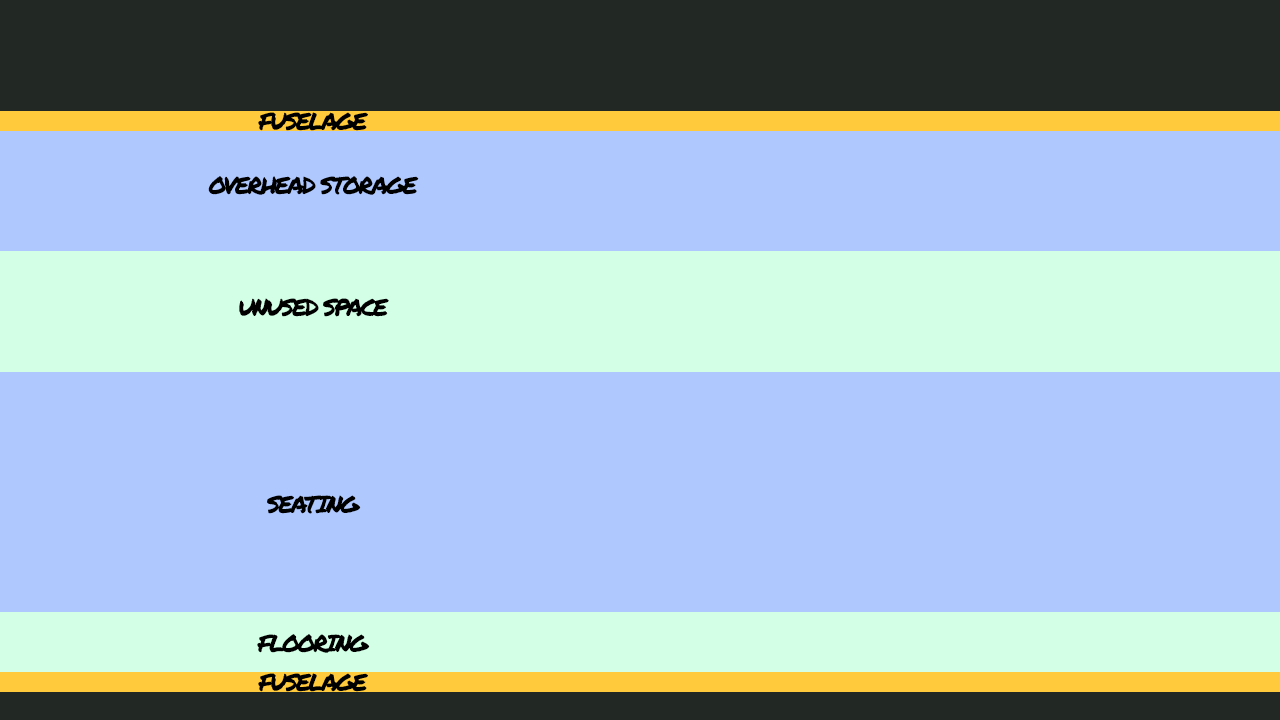
<style>
.page{position:relative;width:1280px;height:720px;background:#afc9ff}
.page>*{position:absolute;margin:0}
.t1{font:24px "PermanentMarker";letter-spacing:-0.1em;color:#000000;text-transform:uppercase}
</style>
<div class="page">
<p class="t1" style="left:258px;top:112px;width:110px;height:19px">fuselage</p>
<p class="t1" style="left:208px;top:176px;width:211px;height:19px">overhead storage</p>
<p class="t1" style="left:239px;top:298px;width:150px;height:19px">unused space</p>
<p class="t1" style="left:267px;top:495px;width:94px;height:19px">seating</p>
<p class="t1" style="left:257px;top:634px;width:113px;height:19px">Flooring</p>
<p class="t1" style="left:258px;top:673px;width:110px;height:19px">fuselage</p>
</div>
